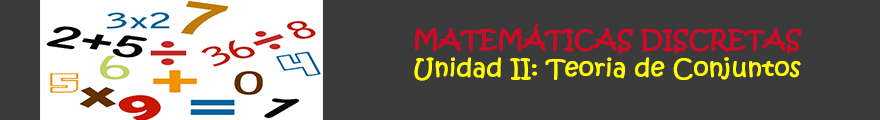
<style>
.page{position:relative;width:880px;height:120px;background:#3b3b3b}
.page>*{position:absolute;margin:0}
.t1{font:24px "KristenITC-Regular";color:#ffff00;font-weight:bold}
.t2{font:24px "KristenITC-Regular";color:#df0024;font-weight:bold}
</style>
<div class="page">
<p class="t1" style="left:414px;top:23px;width:387px;height:58px;text-align:center"><span class="t2">MATEMÁTICAS DISCRETAS<br></span>Unidad II: Teoria de Conjuntos</p>
</div>
